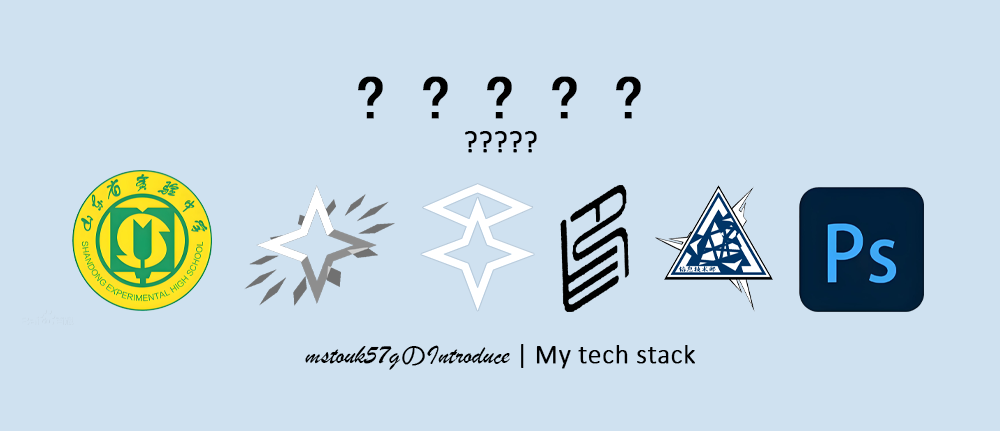
<style>
.page{position:relative;width:1000px;height:431px;background:#cfe1f0}
.page>*{position:absolute;margin:0}
.t1{font:61.1px/61.1px "SimHei";color:#000000;font-weight:bold}
.t2{font:30.6px/61.1px "Calibri-Light";color:#000000;font-weight:bold}
.t3{font:27.3px "STXingkai";color:#000000}
.t4{font:27.3px "Calibri";color:#000000}
.t5{font:27.3px "Calibri-Light";color:#000000;font-weight:bold}
</style>
<div class="page">
<p class="t1" style="left:358px;top:76px;width:283px;height:77px;text-align:center">? ? ? ? ?<br><span class="t2">?????</span></p>
<p class="t3" style="left:305px;top:344px;width:390px;height:26px">mstouk57gのIntroduce<span class="t4"> | </span><span class="t5">My tech stack</span></p>
</div>
